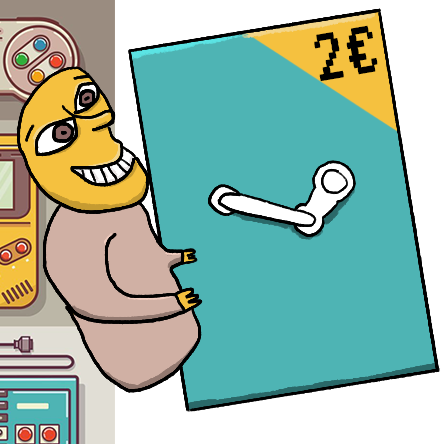
<style>
.page{position:relative;width:446px;height:444px;background:#4eb4b4}
.page>*{position:absolute;margin:0}
.t1{font:83px "VT323-Regular";color:#000000}
</style>
<div class="page">
<p class="t1" style="left:314px;top:25px;width:64px;height:57px;rotate:-10deg">2€</p>
</div>
